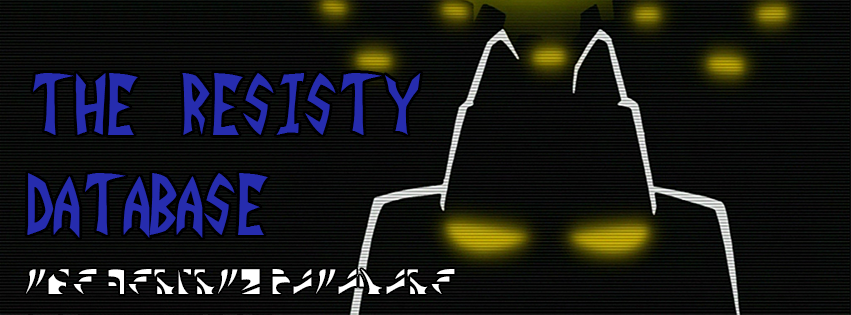
<style>
.page{position:relative;width:851px;height:315px}
.page>*{position:absolute;margin:0}
.t1{font:83px "INVADER";letter-spacing:0.005em;color:#262cae}
.t2{font:36px "Irken";letter-spacing:0.005em;color:#ffffff}
</style>
<div class="page">
<p class="t1" style="left:27px;top:73px;width:394px;height:165px">The Resisty <br>Database</p>
<p class="t2" style="left:26px;top:269px;width:429px;height:25px">The Resisty Database</p>
</div>
